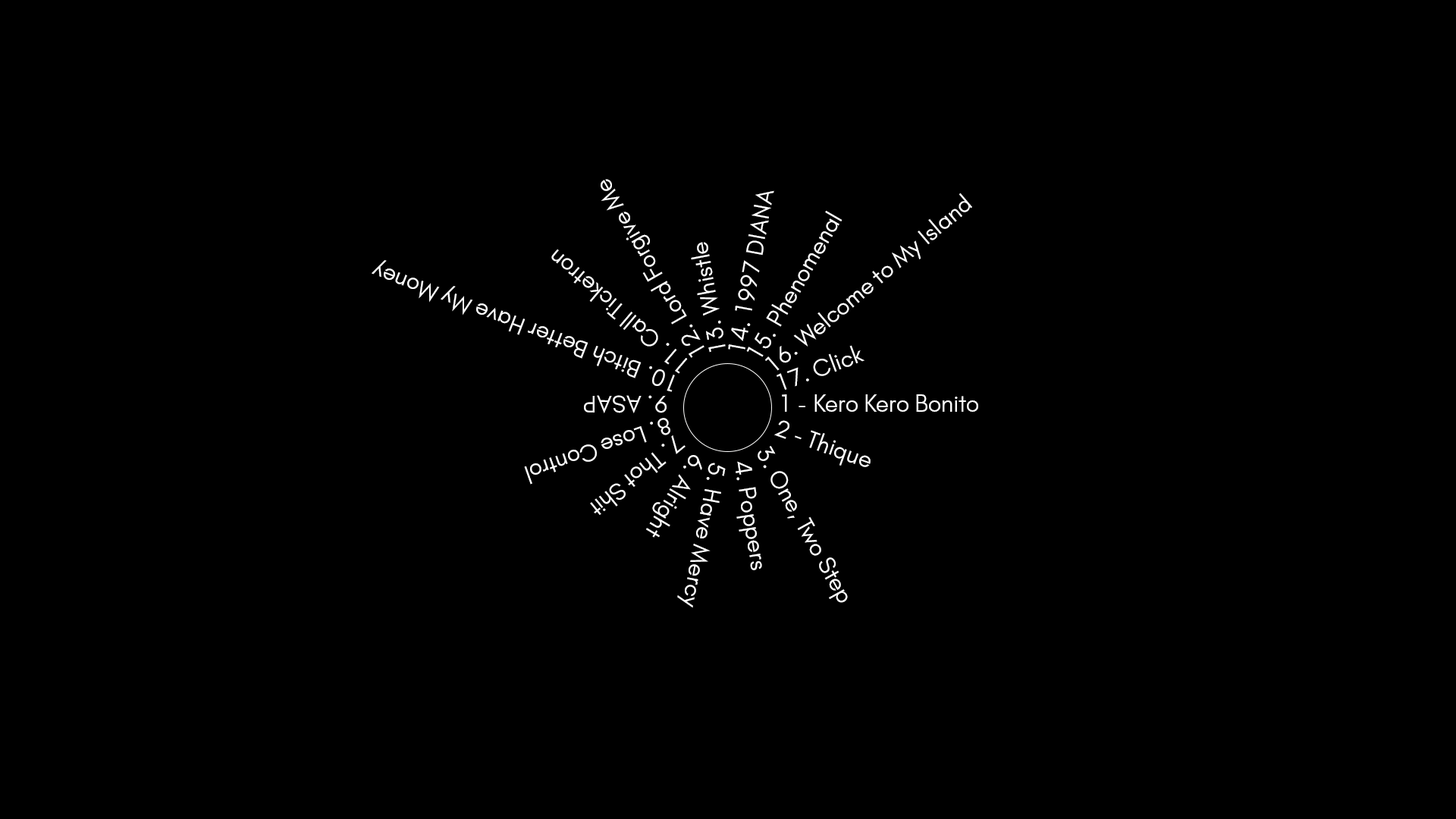
<style>
.page{position:relative;width:1456px;height:819px;background:#000000}
.page>*{position:absolute;margin:0}
.t1{font:23px "GlacialIndifference-Regular";color:#ffffff}
.t2{font:22.9px "GlacialIndifference-Regular";color:#ffffff}
.t3{font:22.5px "GlacialIndifference-Regular";color:#ffffff}
.t4{font:22.7px "GlacialIndifference-Regular";color:#ffffff}
.t5{font:22.8px "GlacialIndifference-Regular";color:#ffffff}
</style>
<div class="page">
<p class="t1" style="left:601px;top:179px;width:103px;height:179px;rotate:-120deg">12. Lord Forgive Me</p>
<p class="t2" style="left:728px;top:190px;width:46px;height:160px;rotate:-80deg">14. 1997 DIANA</p>
<p class="t3" style="left:765px;top:193px;width:207px;height:178px;rotate:-40deg">16. Welcome to My Island</p>
<p class="t4" style="left:746px;top:211px;width:96px;height:146px;rotate:-60deg">15. Phenomenal</p>
<p class="t5" style="left:691px;top:242px;width:35px;height:111px;rotate:-100deg">13. Whistle</p>
<p class="t5" style="left:551px;top:249px;width:137px;height:125px;rotate:-140deg">11. Call Ticketron</p>
<p class="t5" style="left:372px;top:260px;width:303px;height:132px;rotate:-160deg">10. Bitch Better Have My Money</p>
<p class="t4" style="left:777px;top:345px;width:87px;height:45px;rotate:-20deg">17. Click</p>
<p class="t4" style="left:584px;top:395px;width:83px;height:18px;rotate:-180deg">9. ASAP</p>
<p class="t4" style="left:782px;top:394px;width:196px;height:18px">1 - Kero Kero Bonito</p>
<p class="t4" style="left:524px;top:418px;width:146px;height:67px;rotate:161deg">8. Lose Control</p>
<p class="t4" style="left:774px;top:420px;width:97px;height:47px;rotate:20deg">2 - Thique</p>
<p class="t4" style="left:590px;top:435px;width:96px;height:80px;rotate:141deg">7. Thot Shit</p>
<p class="t4" style="left:758px;top:446px;width:90px;height:157px;rotate:61deg">3. One, Two Step</p>
<p class="t4" style="left:646px;top:455px;width:56px;height:83px;rotate:121deg">6. Alright</p>
<p class="t4" style="left:736px;top:461px;width:26px;height:109px;rotate:81deg">4. Poppers</p>
<p class="t4" style="left:677px;top:463px;width:49px;height:145px;rotate:101deg">5. Have Mercy</p>
</div>
